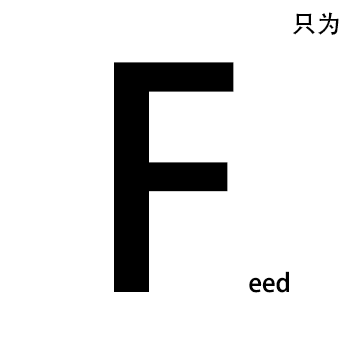
<style>
.page{position:relative;width:354px;height:354px;background:#ffffff}
.page>*{position:absolute;margin:0}
.t1{font:25px "AdobeHeitiStd-Regular";color:#000000}
.t2{font:300px "AdobeHeitiStd-Regular";color:#000000}
</style>
<div class="page">
<p class="t1" style="left:293px;top:12px;width:46px;height:23px">只为</p>
<p class="t1" style="left:114px;top:62px;width:175px;height:231px"><span class="t2">F</span>eed</p>
</div>
